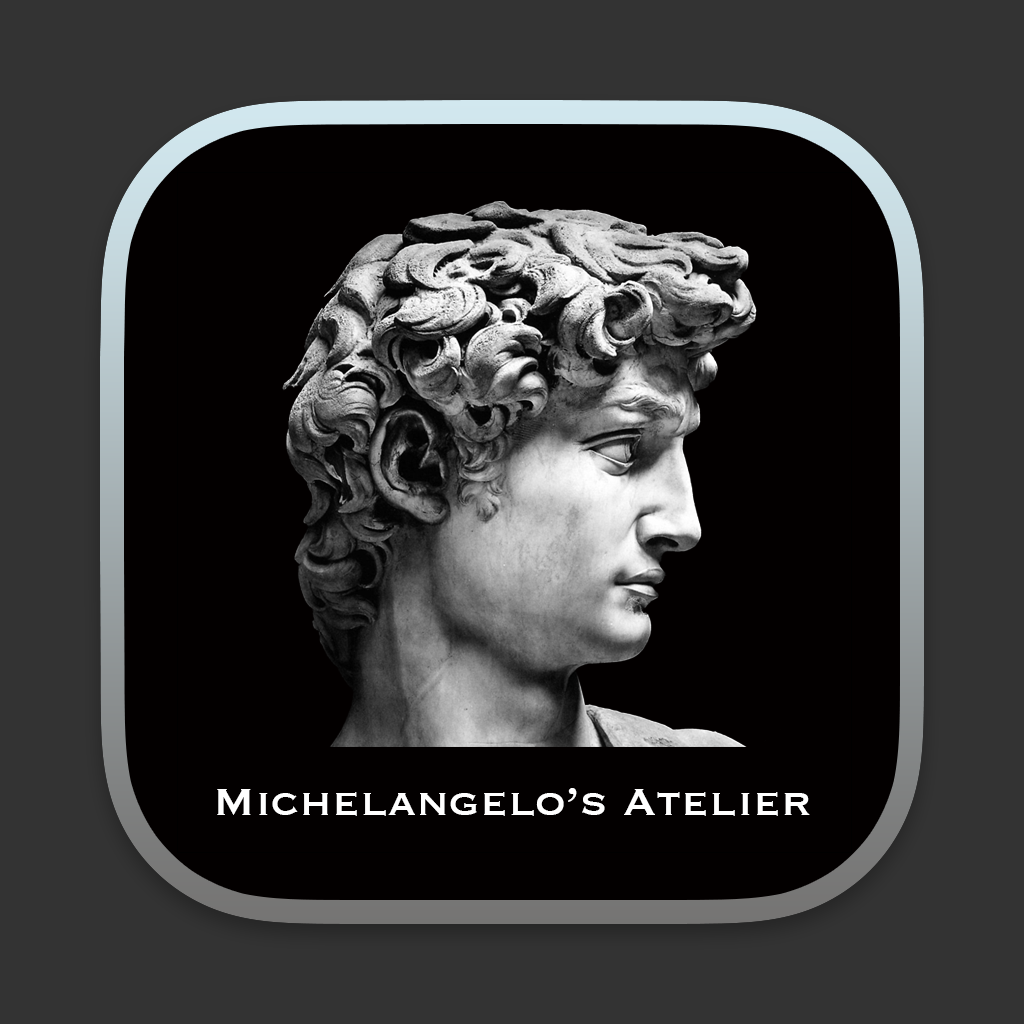
<style>
.page{position:relative;width:1024px;height:1024px;background:#030000}
.page>*{position:absolute;margin:0}
.t1{font:50px "Copperplate";color:#ffffff}
</style>
<div class="page">
<p class="t1" style="left:217px;top:788px;width:593px;height:28px">Michelangelo’s Atelier</p>
</div>
